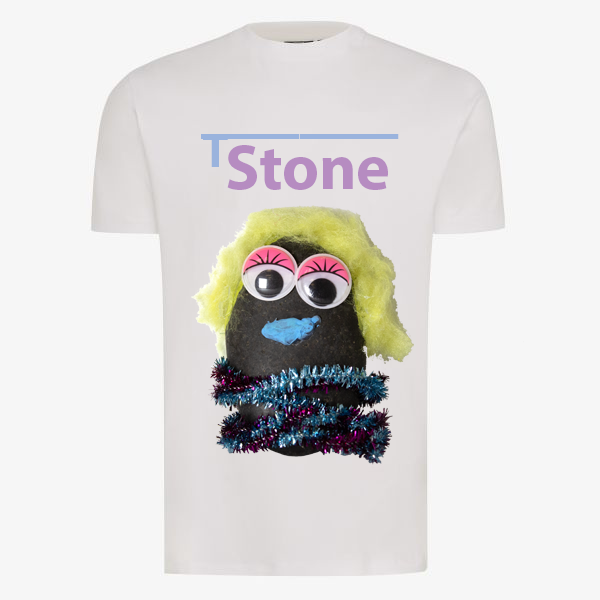
<style>
.page{position:relative;width:600px;height:600px;background:#f6f6f6}
.page>*{position:absolute;margin:0}
.t1{font:98.7px "MyriadPro-Bold";color:#9ab3dd}
.t2{font:48px "MyriadPro-Bold";color:#9ab3dd}
.t3{font:64px "MyriadPro-Bold";color:#b68cc1}
</style>
<div class="page">
<p class="t1" style="left:201px;top:134px;width:198px;height:5px">____</p>
<p class="t2" style="left:203px;top:134px;width:25px;height:33px">T</p>
<p class="t3" style="left:227px;top:145px;width:161px;height:45px">Stone</p>
</div>
